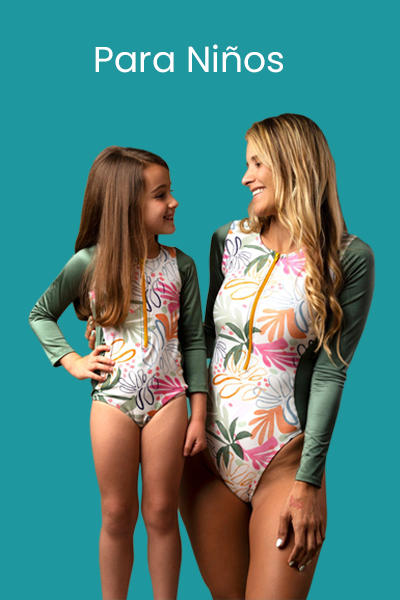
<style>
.page{position:relative;width:400px;height:600px;background:#1e979f}
.page>*{position:absolute;margin:0}
.t1{font:36px "Poppins-Regular";color:#ffffff}
</style>
<div class="page">
<p class="t1" style="left:95px;top:44px;width:188px;height:29px">Para Niños</p>
</div>
